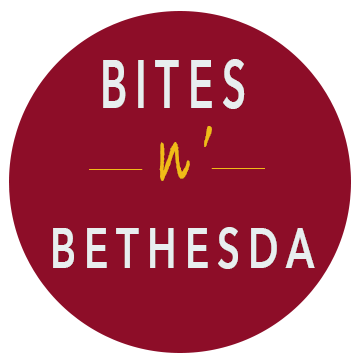
<style>
.page{position:relative;width:355px;height:358px;background:#8d0d28}
.page>*{position:absolute;margin:0}
.t1{font:68.4px "AvenirNext-DemiBold";letter-spacing:0.2em;color:#e8eeef;scale:0.62 1}
.t2{font:96px "BradleyHandITCTT-Bold";letter-spacing:0.25em;color:#f1bb17;scale:0.5 1}
.t3{font:56px "AvenirNext-DemiBold";letter-spacing:0.2em;color:#e8eeef;scale:0.71 1}
</style>
<div class="page">
<p class="t1" style="left:103px;top:59px;width:142px;height:50px">BITES</p>
<p class="t2" style="left:159px;top:126px;width:53px;height:55px">n’</p>
<p class="t3" style="left:53px;top:227px;width:262px;height:42px">BETHESDA</p>
</div>
